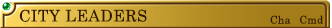
<style>
.page{position:relative;width:332px;height:28px}
.page>*{position:absolute;margin:0}
.t1{font:16px "CenturySchoolbook";letter-spacing:0.025em;color:#321a02}
.t2{font:10.7px "CenturySchoolbook";letter-spacing:0.025em;color:#321a02}
</style>
<div class="page">
<p class="t1" style="left:19px;top:9px;width:128px;height:13px">CITY LEADERS</p>
<p class="t2" style="left:270px;top:15px;width:21px;height:9px">Cha</p>
<p class="t2" style="left:300px;top:15px;width:23px;height:9px">Cmd</p>
</div>
